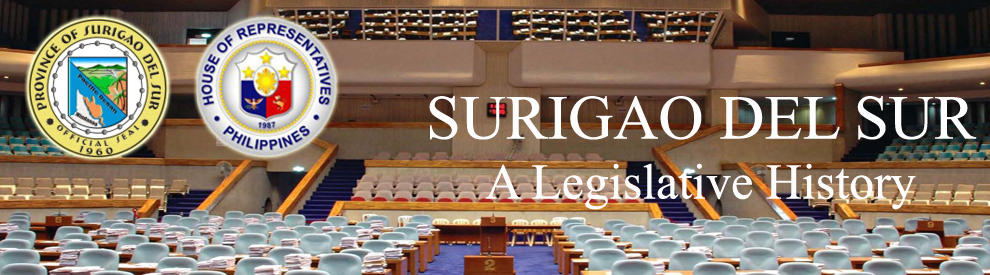
<style>
.page{position:relative;width:990px;height:275px}
.page>*{position:absolute;margin:0}
.t1{font:50px "TimesNewRomanPSMT";color:#fdfcfc}
.t2{font:62.5px "TimesNewRomanPSMT";color:#fdfdfd}
</style>
<div class="page">
<p class="t1" style="left:429px;top:96px;width:548px;height:114px;text-align:center"><span class="t2">SURIGAO DEL SUR<br></span>A Legislative History</p>
</div>
